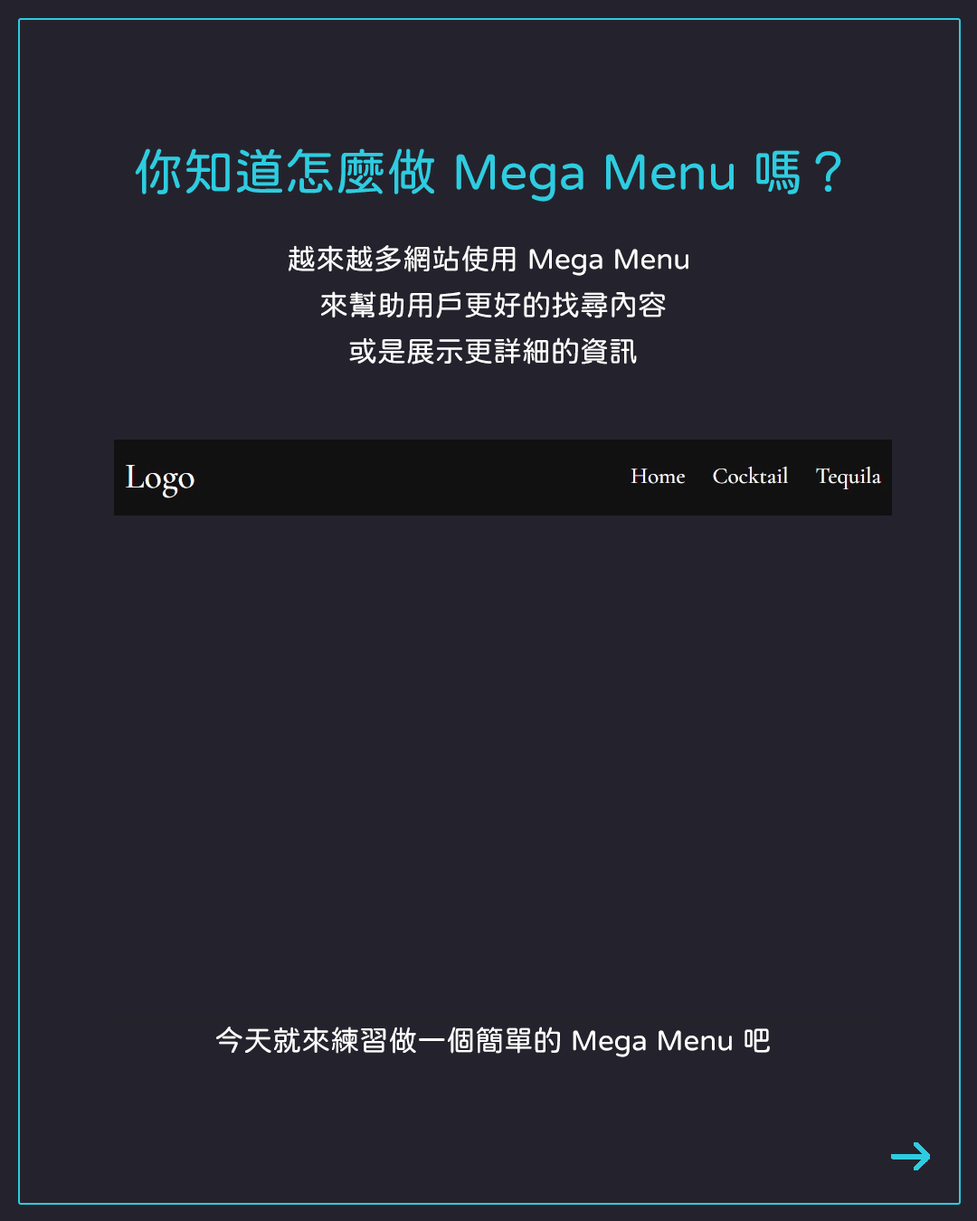
<style>
.page{position:relative;width:977px;height:1221px;background:#24232d}
.page>*{position:absolute;margin:0}
.t1{font:50.6px "jf-openhuninn-1.1";color:#2ecce0}
.t2{font:28.9px/46.1px "jf-openhuninn-1.1";color:#ffffff}
.t3{font:28.9px "jf-openhuninn-1.1";color:#ffffff}
</style>
<div class="page">
<p class="t1" style="left:135px;top:148px;width:706px;height:54px">你知道怎麼做 Mega Menu 嗎？</p>
<p class="t2" style="left:288px;top:245px;width:400px;height:119px;text-align:center">越來越多網站使用 Mega Menu <br>來幫助用戶更好的找尋內容<br>或是展示更詳細的資訊</p>
<p class="t3" style="left:216px;top:1026px;width:554px;height:31px">今天就來練習做一個簡單的 Mega Menu 吧</p>
</div>
